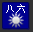
<style>
.page{position:relative;width:33px;height:32px;background:#000090}
.page>*{position:absolute;margin:0}
.t1{font:10.4px "SimSun";color:#ffffff}
</style>
<div class="page">
<p class="t1" style="left:6px;top:4px;width:19px;height:9px">八六</p>
</div>
